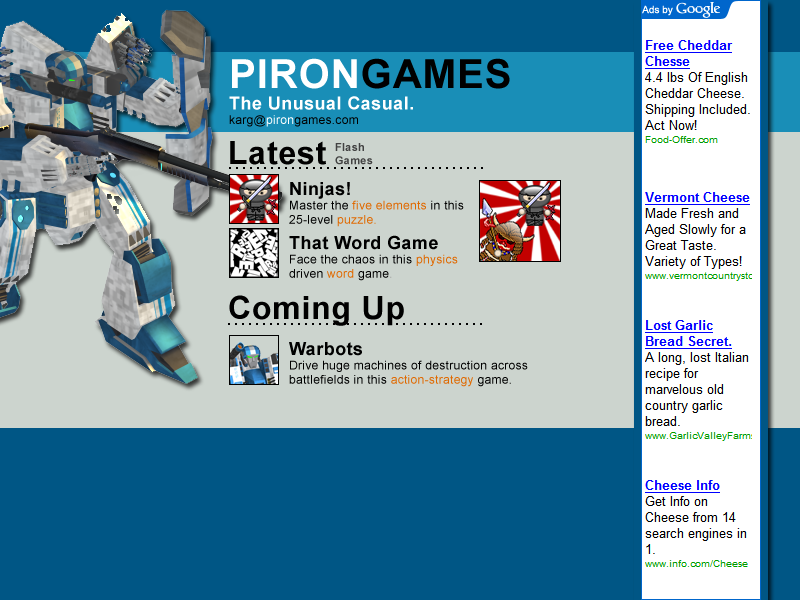
<style>
.page{position:relative;width:800px;height:600px;background:#005685}
.page>*{position:absolute;margin:0}
.t1{font:18px "Arial-BoldMT";letter-spacing:0.025em;color:#ffffff}
.t2{font:40px "Arial-BoldMT";letter-spacing:0.025em;color:#ffffff;text-transform:uppercase}
.t3{font:40px "Arial-BoldMT";letter-spacing:0.025em;color:#000000;text-transform:uppercase}
.t4{font:12px "ArialMT";letter-spacing:0.025em;color:#000000}
.t5{font:12px "ArialMT";letter-spacing:0.025em;color:#ffffff}
.t6{font:32px "Arial-BoldMT";letter-spacing:0.025em;color:#000000}
.t7{font:11px "Arial-BoldMT";letter-spacing:0.025em;color:#424242}
.t8{font:18px "Arial-BoldMT";letter-spacing:0.025em;color:#000000}
.t9{font:12px "ArialMT";letter-spacing:0.025em;color:#e06900}
.t10{font:12px "ArialMT";letter-spacing:0.025em;color:#9b9b9b;font-variant:small-caps}
</style>
<div class="page">
<p class="t1" style="left:229px;top:58px;width:281px;height:69px"><span class="t2">PIRON</span><span class="t3">GAMES<br></span>The Unusual Casual.<br><span class="t4">karg@</span><span class="t5">piron</span><span class="t4">games.com</span></p>
<p class="t6" style="left:230px;top:141px;width:96px;height:24px">Latest</p>
<p class="t7" style="left:335px;top:143px;width:38px;height:22px">Flash<br>Games</p>
<p class="t4" style="left:289px;top:182px;width:175px;height:45px"><span class="t8">Ninjas!<br></span>Master the <span class="t9">five elements </span>in this <br>25-level <span class="t9">puzzle.</span></p>
<p class="t4" style="left:289px;top:235px;width:169px;height:46px"><span class="t8">That Word Game<br></span>Face the chaos in this <span class="t9">physics<br></span>driven <span class="t9">word </span>game<span class="t10">.</span></p>
<p class="t6" style="left:229px;top:295px;width:175px;height:31px">Coming Up</p>
<p class="t4" style="left:289px;top:342px;width:239px;height:45px"><span class="t8">Warbots<br></span>Drive huge machines of destruction across <br>battlefields in this <span class="t9">action-strategy </span>game.</p>
</div>
